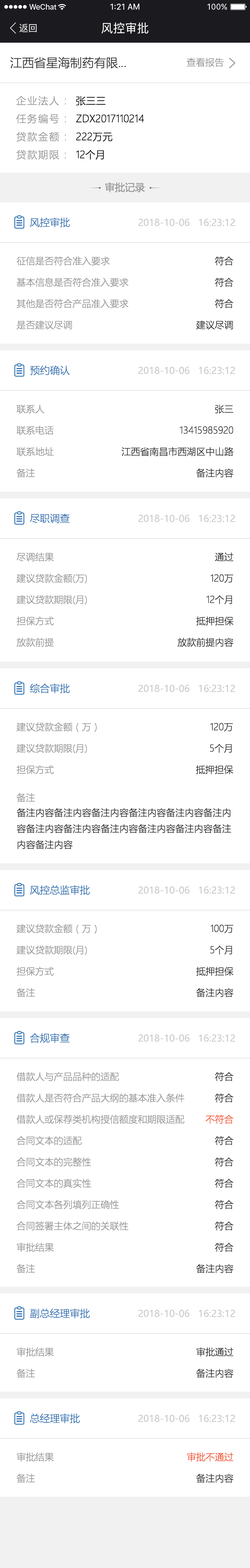
<style>
.page{position:relative;width:250px;height:1568px;background:#ffffff}
.page>*{position:absolute;margin:0}
.t1{font:9.3px "PingFang-SC-Medium";color:#ffffff}
.t2{font:12px "PingFang-SC-Medium";color:#ffffff}
.t3{font:12px "MicrosoftYaHeiLight";color:#333333}
.t4{font:9.3px "MicrosoftYaHeiLight";color:#999999}
.t5{font:10px/19.3px "MicrosoftYaHeiLight";letter-spacing:0.1em;color:#999999}
.t6{font:10px/19.3px "MicrosoftYaHeiLight";color:#000000}
.t7{font:10px "MicrosoftYaHei";color:#999999}
.t8{font:10px "MicrosoftYaHeiLight";color:#3674b2}
.t9{font:9.3px "MicrosoftYaHei";color:#c6c6c6}
.t10{font:9.3px/22.7px "MicrosoftYaHeiLight";color:#999999}
.t11{font:9.3px/22.7px "MicrosoftYaHeiLight";color:#333333}
.t12{font:9.3px/29.3px "MicrosoftYaHeiLight";color:#999999}
.t13{font:9.3px/16px "MicrosoftYaHeiLight";color:#333333}
.t14{font:9.3px/22.7px "MicrosoftYaHeiLight";color:#f35535}
</style>
<div class="page">
<p class="t1" style="left:19px;top:24px;width:18px;height:8px">返回</p>
<p class="t2" style="left:101px;top:22px;width:47px;height:12px">风控审批</p>
<p class="t3" style="left:10px;top:57px;width:116px;height:12px">江西省星海制药有限...</p>
<p class="t4" style="left:187px;top:58px;width:37px;height:9px">查看报告</p>
<p class="t5" style="left:16px;top:96px;width:50px;height:64px">企业法人 :<br>任务编号 :<br>贷款金额 :<br>贷款期限 :</p>
<p class="t6" style="left:76px;top:96px;width:68px;height:64px">张三三<br>ZDX2017110214<br>222万元<br>12个月</p>
<p class="t7" style="left:105px;top:182px;width:40px;height:10px">审批记录</p>
<p class="t8" style="left:30px;top:217px;width:40px;height:10px">风控审批</p>
<p class="t9" style="left:138px;top:219px;width:97px;height:7px">2018-10-06   16:23:12</p>
<p class="t10" style="left:16px;top:256px;width:112px;height:74px">征信是否符合准入要求<br>基本信息是否符合准入要求<br>其他是否符合产品准入要求<br>是否建议尽调</p>
<p class="t11" style="left:196px;top:256px;width:37px;height:74px;text-align:right">符合<br>符合<br>符合<br>建议尽调</p>
<p class="t8" style="left:30px;top:365px;width:40px;height:10px">预约确认</p>
<p class="t9" style="left:138px;top:367px;width:97px;height:7px">2018-10-06   16:23:12</p>
<p class="t10" style="left:16px;top:404px;width:38px;height:74px">联系人<br>联系电话<br>联系地址<br>备注</p>
<p class="t11" style="left:121px;top:404px;width:113px;height:74px;text-align:right">张三<br>13415985920<br>江西省南昌市西湖区中山路<br>备注内容</p>
<p class="t8" style="left:30px;top:513px;width:40px;height:10px">尽职调查</p>
<p class="t9" style="left:138px;top:515px;width:97px;height:7px">2018-10-06   16:23:12</p>
<p class="t10" style="left:16px;top:552px;width:71px;height:95px">尽调结果<br>建议贷款金额(万)<br>建议贷款期限(月)<br>担保方式<br>放款前提</p>
<p class="t11" style="left:178px;top:552px;width:56px;height:95px;text-align:right">通过<br>120万<br>12个月<br>抵押担保<br>放款前提内容</p>
<p class="t8" style="left:30px;top:683px;width:40px;height:10px">综合审批</p>
<p class="t9" style="left:138px;top:685px;width:97px;height:7px">2018-10-06   16:23:12</p>
<p class="t10" style="left:16px;top:722px;width:81px;height:80px">建议贷款金额（万）<br>建议贷款期限(月)<br>担保方式<br><span class="t12">备注</span></p>
<p class="t11" style="left:196px;top:723px;width:37px;height:51px;text-align:right">120万<br>5个月<br>抵押担保</p>
<p class="t13" style="left:17px;top:808px;width:214px;height:41px">备注内容备注内容备注内容备注内容备注内容备注内容备注内容备注内容备注内容备注内容备注内容备注内容备注内容</p>
<p class="t8" style="left:30px;top:885px;width:60px;height:10px">风控总监审批</p>
<p class="t9" style="left:138px;top:886px;width:97px;height:8px">2018-10-06   16:23:12</p>
<p class="t10" style="left:16px;top:924px;width:81px;height:73px">建议贷款金额（万）<br>建议贷款期限(月)<br>担保方式<br>备注</p>
<p class="t11" style="left:196px;top:924px;width:38px;height:73px;text-align:right">100万<br>5个月<br>抵押担保<br>备注内容</p>
<p class="t8" style="left:30px;top:1033px;width:40px;height:10px">合规审查</p>
<p class="t9" style="left:138px;top:1034px;width:97px;height:8px">2018-10-06   16:23:12</p>
<p class="t10" style="left:16px;top:1072px;width:169px;height:201px">借款人与产品品种的适配<br>借款人是否符合产品大纲的基本准入条件<br>借款人或保荐类机构授信额度和期限适配<br>合同文本的适配<br>合同文本的完整性<br>合同文本的真实性<br>合同文本各列填列正确性<br>合同签署主体之间的关联性<br>审批结果<br>备注</p>
<p class="t11" style="left:196px;top:1072px;width:38px;height:201px;text-align:right">符合<br>符合<br><span class="t14">不符合<br></span>符合<br>符合<br>符合<br>符合<br>符合<br>符合<br>备注内容</p>
<p class="t8" style="left:30px;top:1308px;width:60px;height:10px">副总经理审批</p>
<p class="t9" style="left:138px;top:1310px;width:97px;height:7px">2018-10-06   16:23:12</p>
<p class="t10" style="left:16px;top:1347px;width:38px;height:31px">审批结果<br>备注</p>
<p class="t11" style="left:196px;top:1347px;width:38px;height:31px;text-align:right">审批通过<br>备注内容</p>
<p class="t8" style="left:30px;top:1413px;width:50px;height:10px">总经理审批</p>
<p class="t9" style="left:138px;top:1415px;width:97px;height:7px">2018-10-06   16:23:12</p>
<p class="t10" style="left:16px;top:1452px;width:38px;height:31px">审批结果<br>备注</p>
<p class="t14" style="left:187px;top:1452px;width:47px;height:31px;text-align:right">审批不通过<br><span class="t11">备注内容</span></p>
</div>
